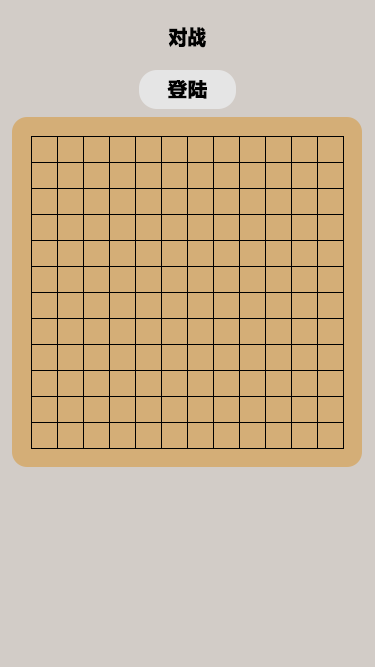
<style>
.page{position:relative;width:375px;height:667px;background:#d2ccc7}
.page>*{position:absolute;margin:0}
.t1{font:21.2px "FZLTTHK--GBK1-0";color:#000000;scale:0.89 1}
.t2{font:20px "FZLTTHK--GBK1-0";color:#000000}
</style>
<div class="page">
<p class="t1" style="left:168px;top:27px;width:38px;height:21px">对战</p>
<p class="t2" style="left:167px;top:80px;width:40px;height:19px">登陆</p>
</div>
